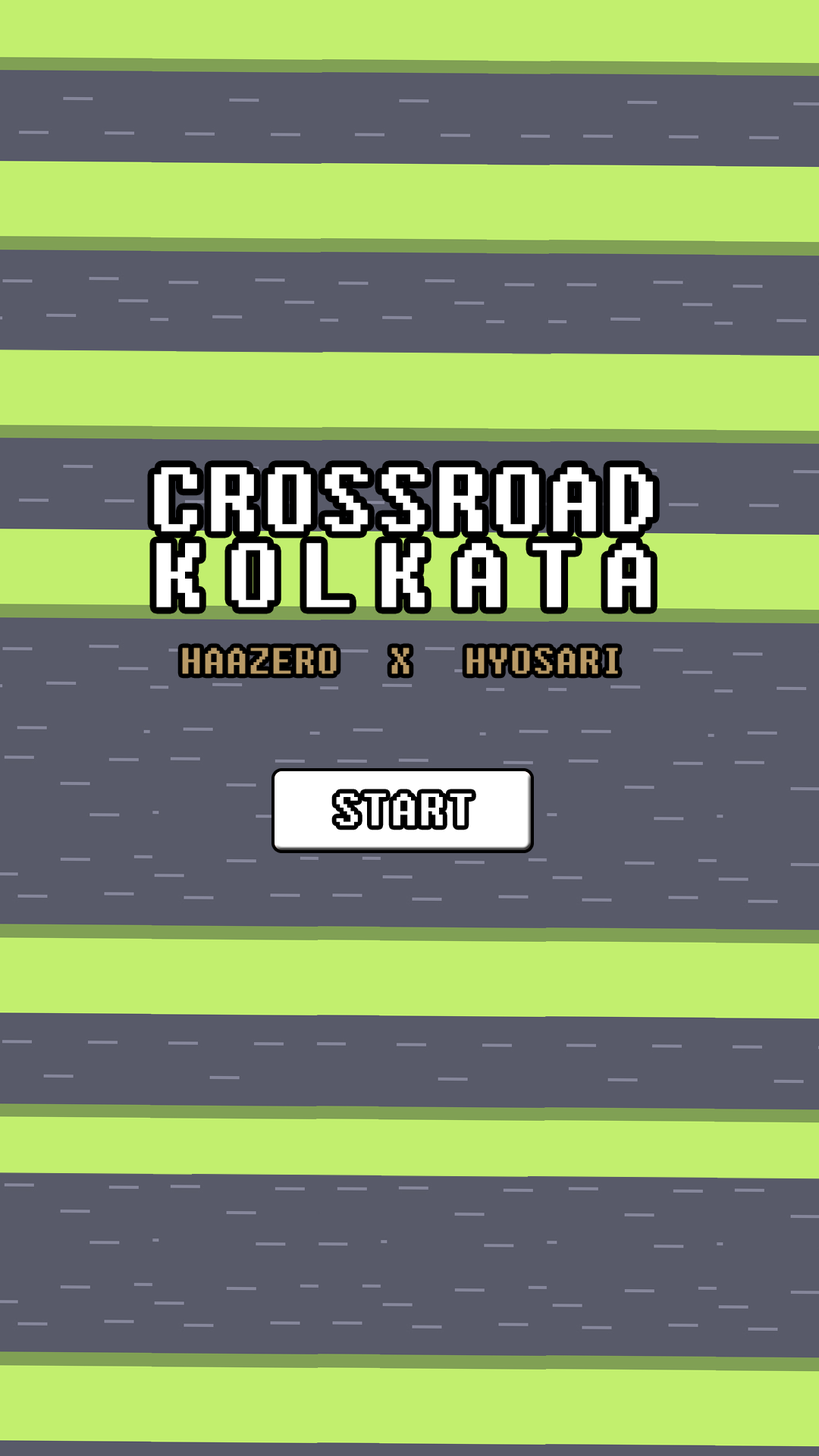
<style>
.page{position:relative;width:819px;height:1456px;background:#585a69}
.page>*{position:absolute;margin:0}
.t1{font:113.8px/75.8px "Fixedsys";color:#ffffff}
.t2{font:113.8px/75.8px "Fixedsys";letter-spacing:0.16em;color:#ffffff}
.t3{font:45.5px "Fixedsys";color:#b99a66}
</style>
<div class="page">
<p class="t1" style="left:154px;top:467px;width:499px;height:140px;text-align:center">CROSSROAD<br><span class="t2">KOLKATA</span></p>
<p class="t3" style="left:182px;top:648px;width:155px;height:26px">HAAZERO</p>
<p class="t3" style="left:391px;top:648px;width:18px;height:26px">X</p>
<p class="t3" style="left:466px;top:648px;width:152px;height:26px">HYOSARI</p>
</div>
